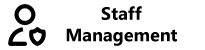
<style>
.page{position:relative;width:205px;height:50px;background:#ffffff}
.page>*{position:absolute;margin:0}
.t1{font:18px "MicrosoftTaiLe-Bold";color:#000000}
</style>
<div class="page">
<p class="t1" style="left:66px;top:6px;width:111px;height:40px;text-align:center">Staff Management</p>
</div>
